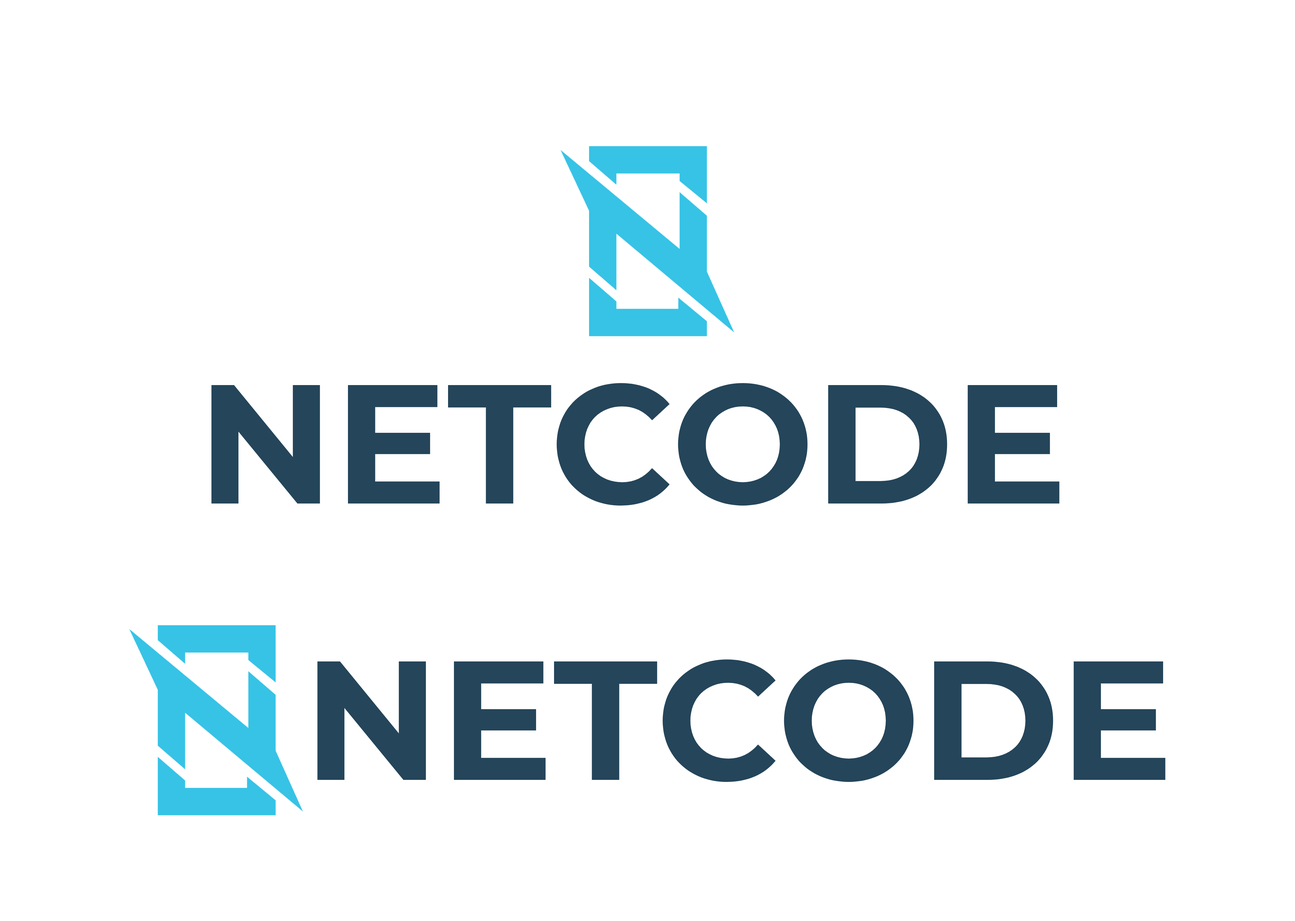
<style>
.page{position:relative;width:1295px;height:921px;background:#ffffff}
.page>*{position:absolute;margin:0}
.t1{font:169.1px "Montserrat-Bold";color:#24455a}
</style>
<div class="page">
<p class="t1" style="left:211px;top:383px;width:849px;height:122px">NETCODE</p>
<p class="t1" style="left:317px;top:659px;width:849px;height:123px">NETCODE</p>
</div>
